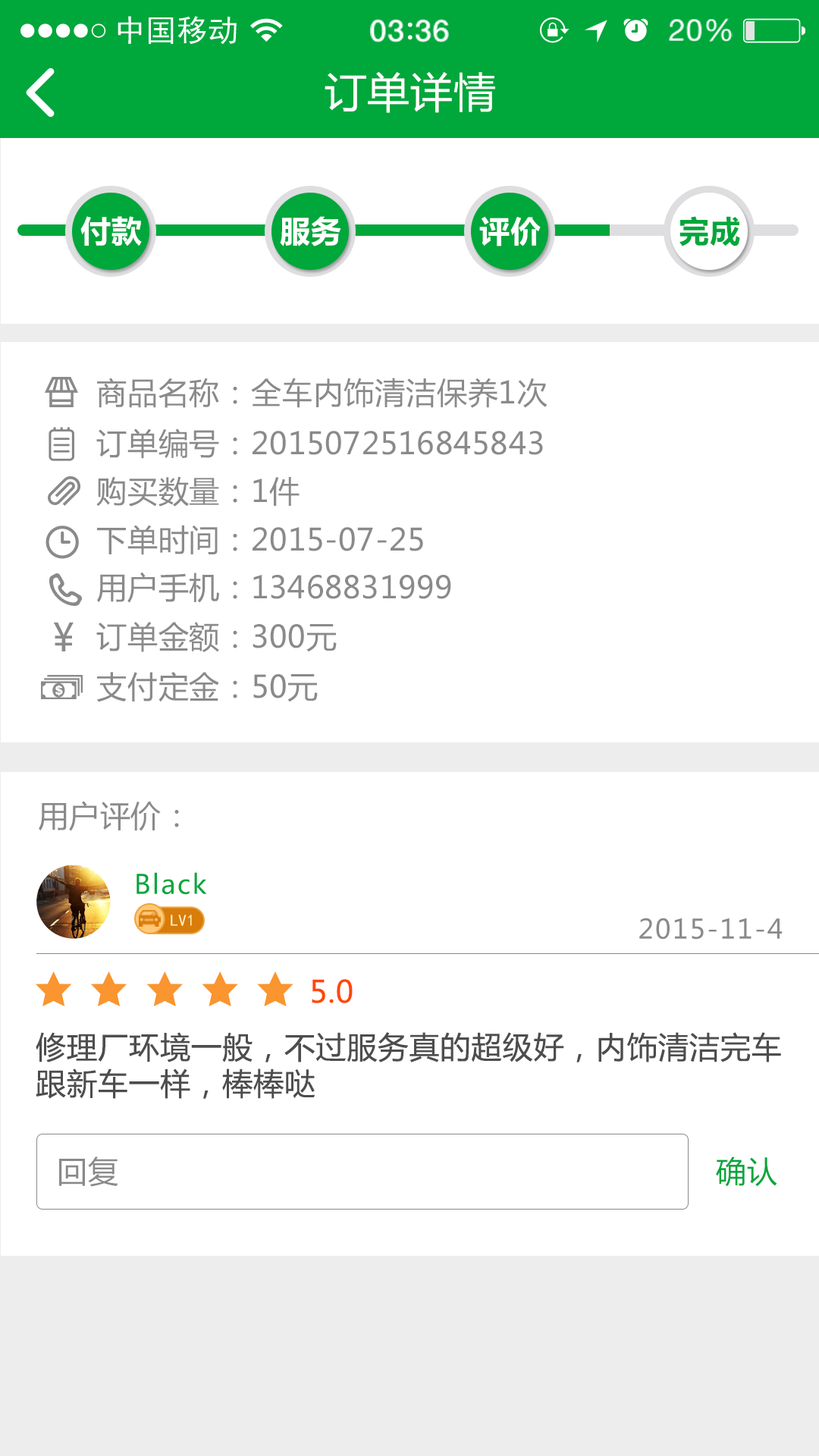
<style>
.page{position:relative;width:819px;height:1456px;background:#ffffff}
.page>*{position:absolute;margin:0}
.t1{font:41.7px "MicrosoftYaHei";letter-spacing:0.02em;color:#ffffff}
.t2{font:30.3px "MicrosoftYaHei-Bold";letter-spacing:0.02em;color:#ffffff}
.t3{font:30.3px "MicrosoftYaHei-Bold";letter-spacing:0.02em;color:#00a73b}
.t4{font:30.3px "MicrosoftYaHei";letter-spacing:0.02em;color:#8a8a8a}
.t5{font:30.7px "MicrosoftYaHei";letter-spacing:0.02em;color:#8a8a8a}
.t6{font:38.4px "MicrosoftYaHei";letter-spacing:0.02em;color:#8a8a8a}
.t7{font:26.5px "MicrosoftYaHei";letter-spacing:0.06em;color:#00a73b}
.t8{font:16.2px "SimHei";letter-spacing:0.02em;color:#fff1bf}
.t9{font:26.5px "MicrosoftYaHei";letter-spacing:0.06em;color:#8a8a8a}
.t10{font:30.3px "MicrosoftYaHei";letter-spacing:0.02em;color:#ff4800}
.t11{font:30.3px "MicrosoftYaHei";letter-spacing:0.02em;color:#4d4d4d}
.t12{font:30.3px "MicrosoftYaHei";letter-spacing:0.02em;color:#00a73b}
</style>
<div class="page">
<p class="t1" style="left:325px;top:71px;width:170px;height:42px">订单详情</p>
<p class="t2" style="left:80px;top:216px;width:62px;height:30px">付款</p>
<p class="t2" style="left:280px;top:216px;width:61px;height:30px">服务</p>
<p class="t2" style="left:479px;top:216px;width:62px;height:30px">评价</p>
<p class="t3" style="left:679px;top:216px;width:61px;height:30px">完成</p>
<p class="t4" style="left:97px;top:378px;width:451px;height:30px">商品名称：全车内饰清洁保养1次</p>
<p class="t4" style="left:96px;top:428px;width:447px;height:31px">订单编号：2015072516845843</p>
<p class="t4" style="left:96px;top:476px;width:204px;height:31px">购买数量：1件</p>
<p class="t4" style="left:97px;top:525px;width:326px;height:30px">下单时间：2015-07-25</p>
<p class="t5" style="left:97px;top:572px;width:354px;height:31px">用户手机：13468831999</p>
<p class="t6" style="left:53px;top:622px;width:21px;height:29px">¥</p>
<p class="t5" style="left:96px;top:622px;width:241px;height:30px">订单金额：300元</p>
<p class="t5" style="left:97px;top:672px;width:221px;height:30px">支付定金：50元</p>
<p class="t4" style="left:39px;top:801px;width:140px;height:30px">用户评价：</p>
<p class="t7" style="left:136px;top:872px;width:71px;height:23px">Black</p>
<p class="t8" style="left:171px;top:915px;width:21px;height:11px">LV1</p>
<p class="t9" style="left:639px;top:918px;width:144px;height:22px">2015-11-4</p>
<p class="t10" style="left:312px;top:979px;width:41px;height:24px">5.0</p>
<p class="t11" style="left:36px;top:1032px;width:745px;height:67px">修理厂环境一般，不过服务真的超级好，内饰清洁完车跟新车一样，棒棒哒</p>
<p class="t4" style="left:59px;top:1156px;width:59px;height:31px">回复</p>
<p class="t12" style="left:716px;top:1156px;width:61px;height:31px">确认</p>
</div>
